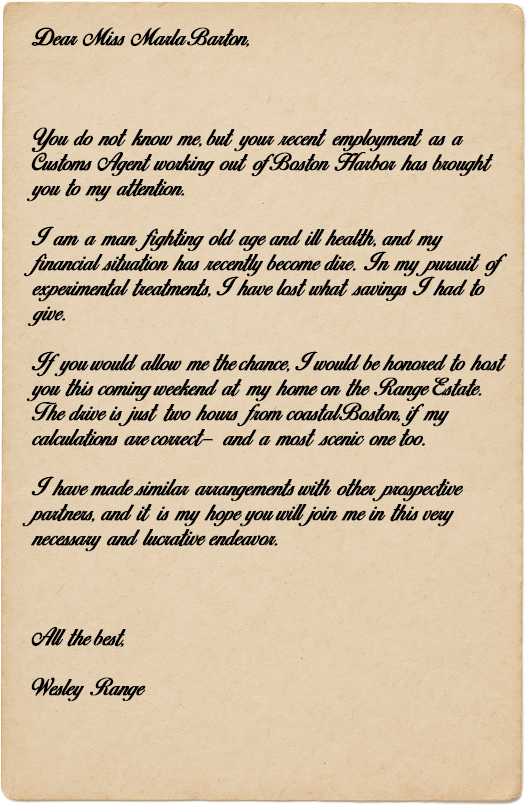
<style>
.page{position:relative;width:528px;height:806px}
.page>*{position:absolute;margin:0}
.t1{font:20.8px "BirdsofParadise-PersonaluseOnly";color:#000000;font-weight:bold}
</style>
<div class="page">
<p class="t1" style="left:22px;top:27px;width:486px;height:675px">Dear Miss Marla Barton,<br><br><br><br>You do not know me, but your recent employment as a Customs Agent working out of Boston Harbor has brought you to my attention.<br><br>I am a man fighting old age and ill health, and my financial situation has recently become dire. In my pursuit of experimental treatments, I have lost what savings I had to give.<br><br>If you would allow me the chance, I would be honored to host you this coming weekend at my home on the Range Estate. The drive is just two hours from coastal Boston, if my calculations are correct– and a most scenic one too. <br><br>I have made similar arrangements with other prospective partners, and it is my hope you will join me in this very necessary and lucrative endeavor.<br><br><br><br>All the best,<br><br>Wesley Range</p>
</div>
